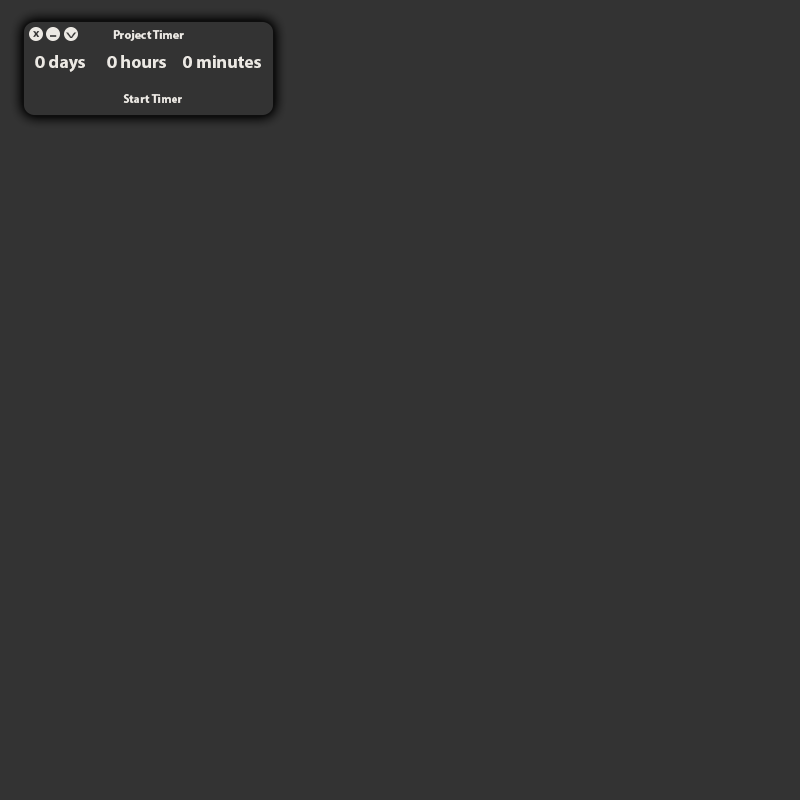
<style>
.page{position:relative;width:800px;height:800px;background:#333333}
.page>*{position:absolute;margin:0}
.t1{font:12px "MyriadPro-Bold";color:#ece9e4}
.t2{font:12px "MyriadPro-Bold";color:#333333}
.t3{font:35px "MyriadPro-Bold";scale:0.34 1}
.t4{font:19.3px "MyriadPro-Bold";color:#333333;scale:0.61 1}
.t5{font:18px "MyriadPro-Bold";color:#ece9e4}
</style>
<div class="page">
<p class="t1" style="left:113px;top:30px;width:71px;height:11px">Project Timer</p>
<p class="t2" style="left:33px;top:31px;width:7px;height:6px">x</p>
<p class="t3" style="left:50px;top:35px;width:7px;height:2px">_</p>
<p class="t4" style="left:66px;top:32px;width:11px;height:6px;rotate:90deg">&gt;</p>
<p class="t5" style="left:35px;top:55px;width:226px;height:17px">0 days 0 hours  0 minutes</p>
<p class="t1" style="left:123px;top:94px;width:59px;height:9px">Start Timer</p>
</div>
